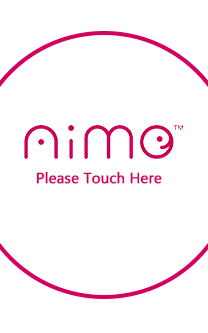
<style>
.page{position:relative;width:208px;height:333px;background:#ffffff}
.page>*{position:absolute;margin:0}
.t1{font:14.7px "MicrosoftPhagsPa";color:#d2015f;font-weight:bold}
</style>
<div class="page">
<p class="t1" style="left:36px;top:171px;width:126px;height:13px">Please Touch Here</p>
</div>
